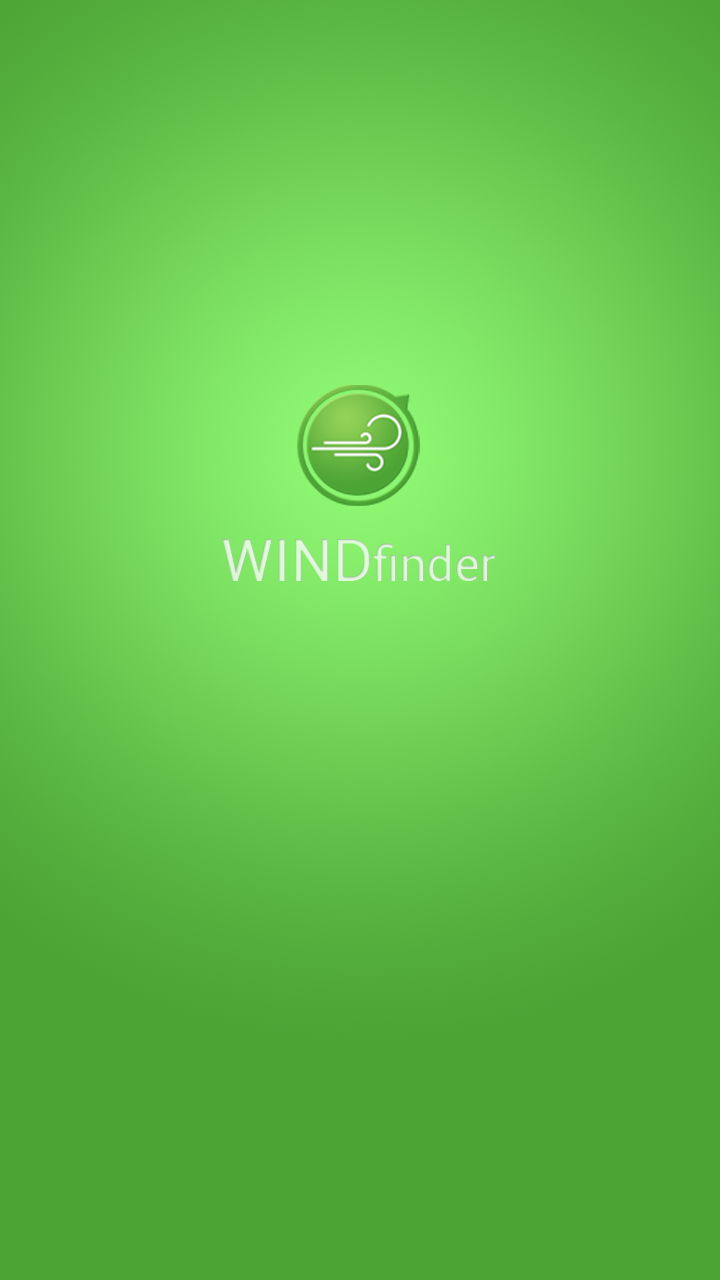
<style>
.page{position:relative;width:720px;height:1280px;background:#4ca435}
.page>*{position:absolute;margin:0}
.t1{font:48px "Roboto-Regular";color:#ddf7d8}
.t2{font:60px "Roboto-Regular";color:#ddf7d8}
</style>
<div class="page">
<p class="t1" style="left:222px;top:539px;width:273px;height:42px"><span class="t2">WIND</span>finder</p>
</div>
